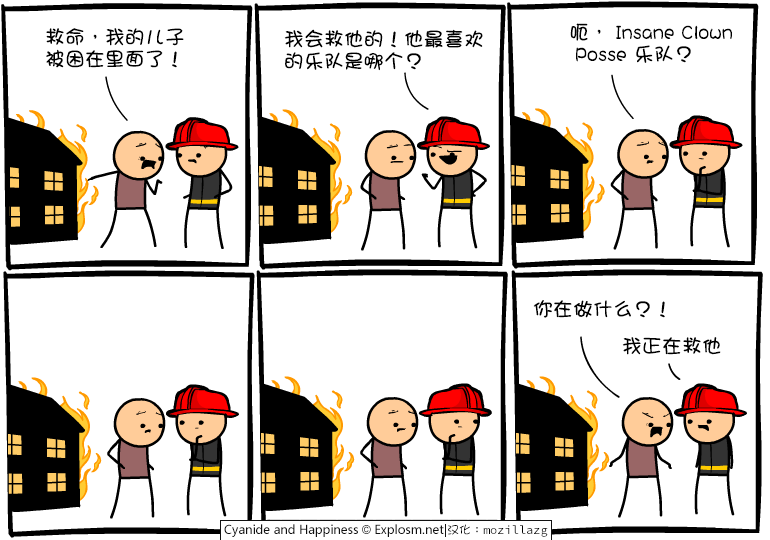
<style>
.page{position:relative;width:770px;height:540px;background:#ffffff}
.page>*{position:absolute;margin:0}
.t1{font:20px/22px "DFGirl";color:#000000}
.t2{font:20px "DFGirl";color:#000000}
</style>
<div class="page">
<p class="t1" style="left:46px;top:28px;width:138px;height:40px">救命，我的儿子<br>被困在里面了！</p>
<p class="t1" style="left:284px;top:29px;width:199px;height:42px">我会救他的！他最喜欢<br>的乐队是哪个？</p>
<p class="t1" style="left:570px;top:23px;width:162px;height:40px">呃， Insane Clown<br> Posse 乐队？</p>
<p class="t2" style="left:533px;top:300px;width:132px;height:18px">你在做什么？！</p>
<p class="t2" style="left:622px;top:337px;width:99px;height:18px">我正在救他</p>
</div>
